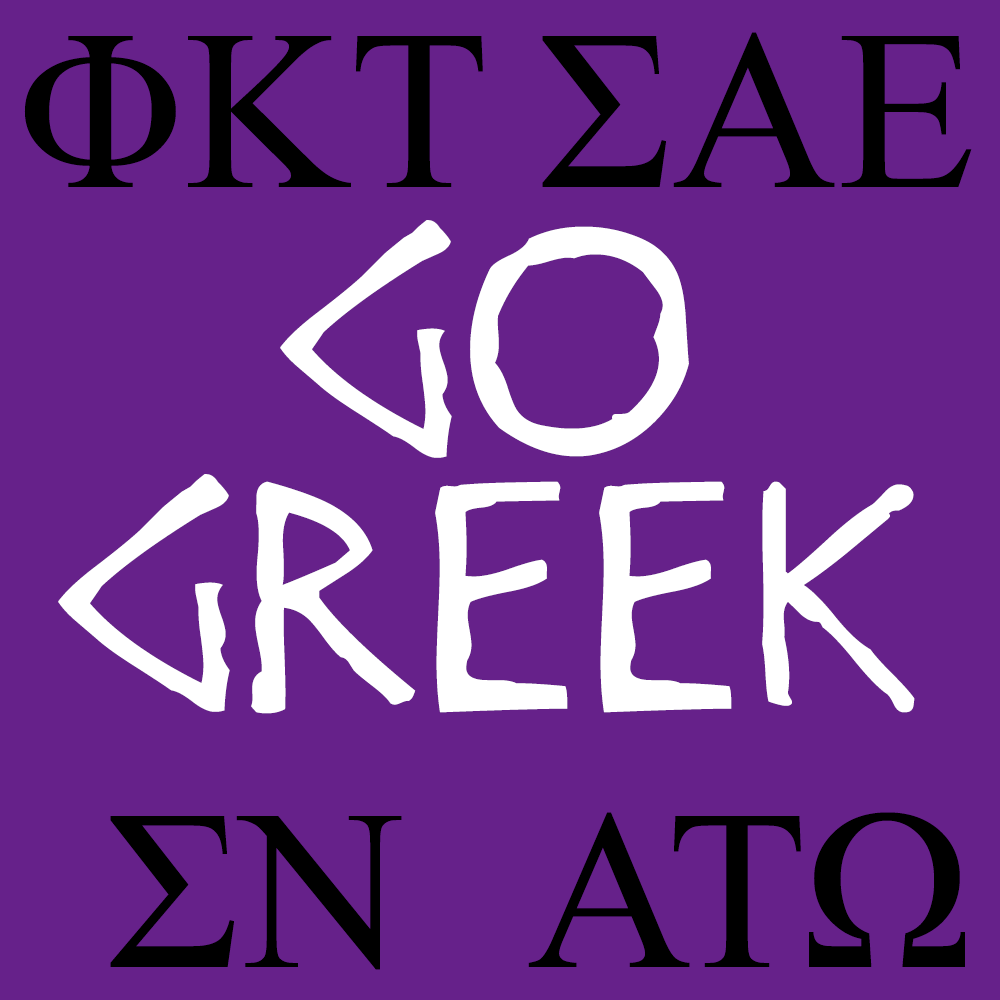
<style>
.page{position:relative;width:1000px;height:1000px;background:#66218a}
.page>*{position:absolute;margin:0}
.t1{font:227.7px "TimesNewRomanPSMT";color:#000000}
.t2{font:287.6px "DisneyHeroic";color:#ffffff}
</style>
<div class="page">
<p class="t1" style="left:24px;top:36px;width:459px;height:151px">ΦKT</p>
<p class="t1" style="left:542px;top:32px;width:430px;height:155px">ΣΑΕ</p>
<p class="t2" style="left:280px;top:220px;width:409px;height:238px">Go</p>
<p class="t2" style="left:58px;top:474px;width:857px;height:240px">GREEK</p>
<p class="t1" style="left:110px;top:816px;width:292px;height:154px">ΣΝ</p>
<p class="t1" style="left:528px;top:812px;width:437px;height:155px">ΑΤΩ</p>
</div>
